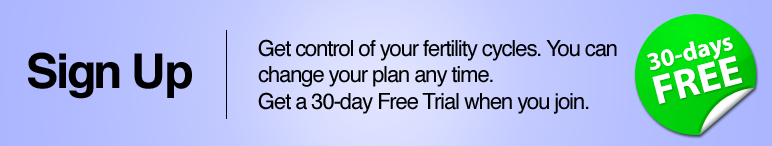
<style>
.page{position:relative;width:772px;height:146px}
.page>*{position:absolute;margin:0}
.t1{font:22px "Helvetica";letter-spacing:-0.05em;color:#000000}
.t2{font:25px "MyriadPro-Bold";color:#ffffff}
.t3{font:48px "Helvetica-Bold";letter-spacing:-0.05em;color:#000000}
.t4{font:41.2px "MyriadPro-Bold";color:#ffffff}
</style>
<div class="page">
<p class="t1" style="left:258px;top:39px;width:359px;height:75px">Get control of your fertility cycles. You can<br>change your plan any time. <br>Get a 30-day Free Trial when you join.</p>
<p class="t2" style="left:647px;top:37px;width:86px;height:33px;rotate:-15deg">30-days</p>
<p class="t3" style="left:28px;top:52px;width:164px;height:47px">Sign Up</p>
<p class="t4" style="left:652px;top:55px;width:91px;height:49px;rotate:-15deg">FREE</p>
</div>
